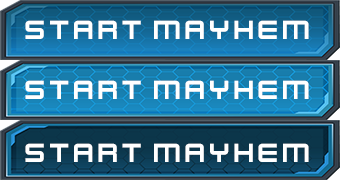
<style>
.page{position:relative;width:340px;height:180px}
.page>*{position:absolute;margin:0}
.t1{font:29.2px "KenVector-Future";color:#ffffff}
</style>
<div class="page">
<p class="t1" style="left:25px;top:20px;width:284px;height:19px">START MAYHEM</p>
<p class="t1" style="left:25px;top:80px;width:284px;height:19px">START MAYHEM</p>
<p class="t1" style="left:25px;top:143px;width:284px;height:19px">START MAYHEM</p>
</div>
